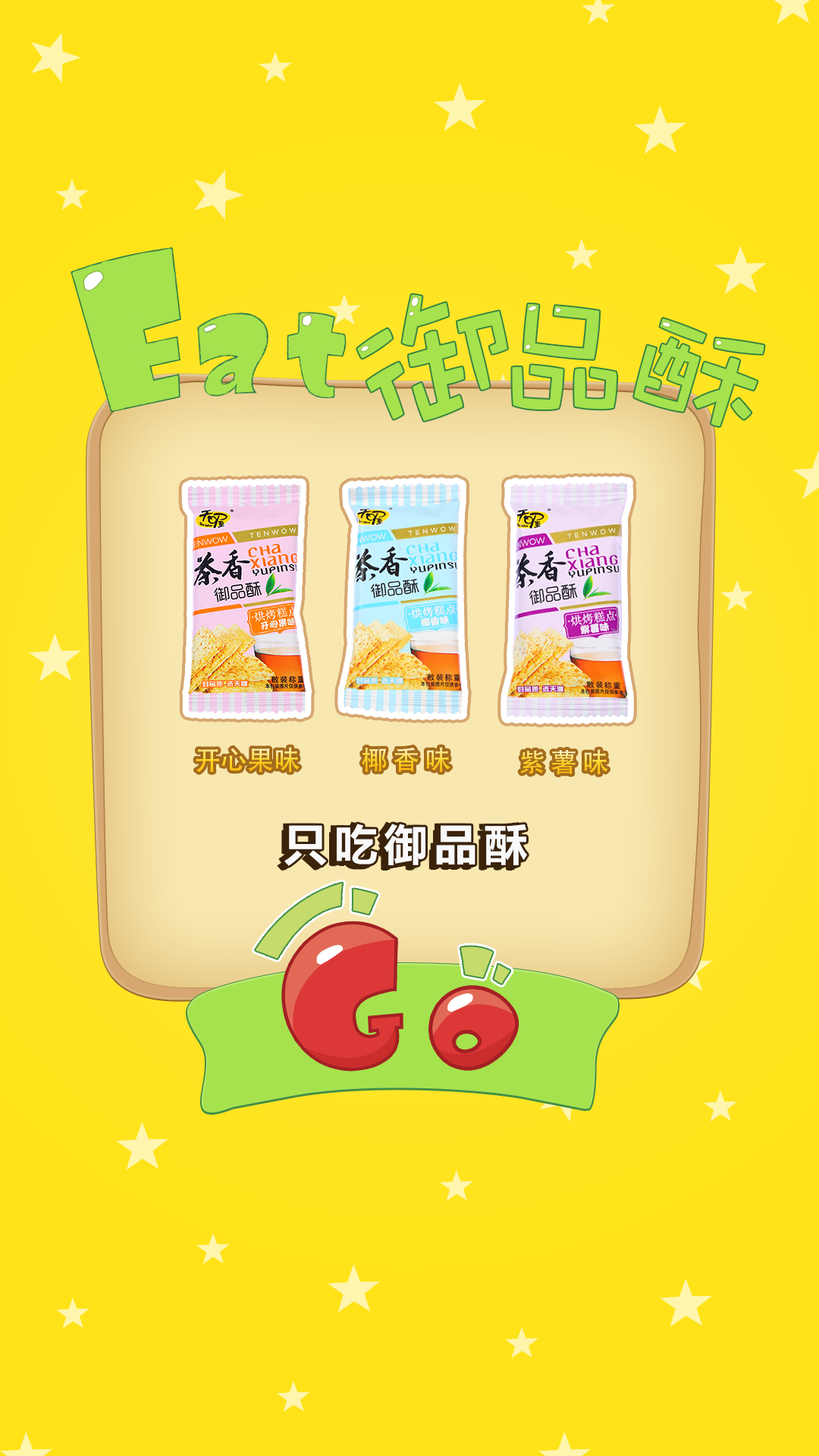
<style>
.page{position:relative;width:819px;height:1456px;background:#ffe318}
.page>*{position:absolute;margin:0}
.t1{font:197.9px "DFWaWa-Md-HK-BF";letter-spacing:-0.1em;color:#a5e24d;scale:0.86 1}
.t2{font:144.1px "DFWaWa-Md-HK-BF";letter-spacing:-0.1em;color:#a5e24d}
.t3{font:143.5px "DFWaWa-Md-HK-BF";letter-spacing:-0.1em;color:#a5e24d}
.t4{font:26.5px "AdobeHeitiStd-Regular"}
.t5{font:26.5px "AdobeHeitiStd-Regular";letter-spacing:0.2em}
.t6{font:45.5px "FZLTCHK--GBK1-0";letter-spacing:0.1em;color:#f9f9f9}
</style>
<div class="page">
<p class="t1" style="left:357px;top:294px;width:150px;height:127px;rotate:-21deg">御</p>
<p class="t2" style="left:512px;top:304px;width:105px;height:106px;rotate:2deg">品</p>
<p class="t3" style="left:634px;top:318px;width:130px;height:108px;rotate:17deg">酥</p>
<p class="t4" style="left:196px;top:747px;width:104px;height:25px">开心果味</p>
<p class="t5" style="left:362px;top:747px;width:88px;height:25px">椰香味</p>
<p class="t5" style="left:520px;top:749px;width:88px;height:25px">紫薯味</p>
<p class="t6" style="left:284px;top:824px;width:243px;height:42px">只吃御品酥</p>
<p class="t6" style="left:285px;top:824px;width:243px;height:42px">只吃御品酥</p>
</div>
